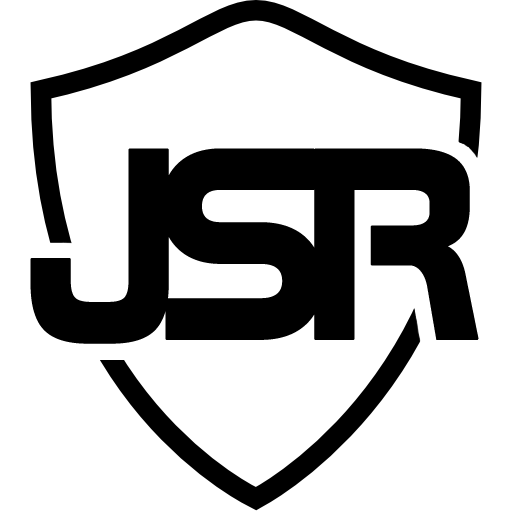
<style>
.page{position:relative;width:512px;height:512px;background:#ffffff}
.page>*{position:absolute;margin:0}
.t1{font:273px "SpaceBT-Bold";letter-spacing:-0.12em;color:#000000;font-weight:bold;scale:0.95 1}
</style>
<div class="page">
<p class="t1" style="left:30px;top:148px;width:449px;height:196px">JSR</p>
</div>
